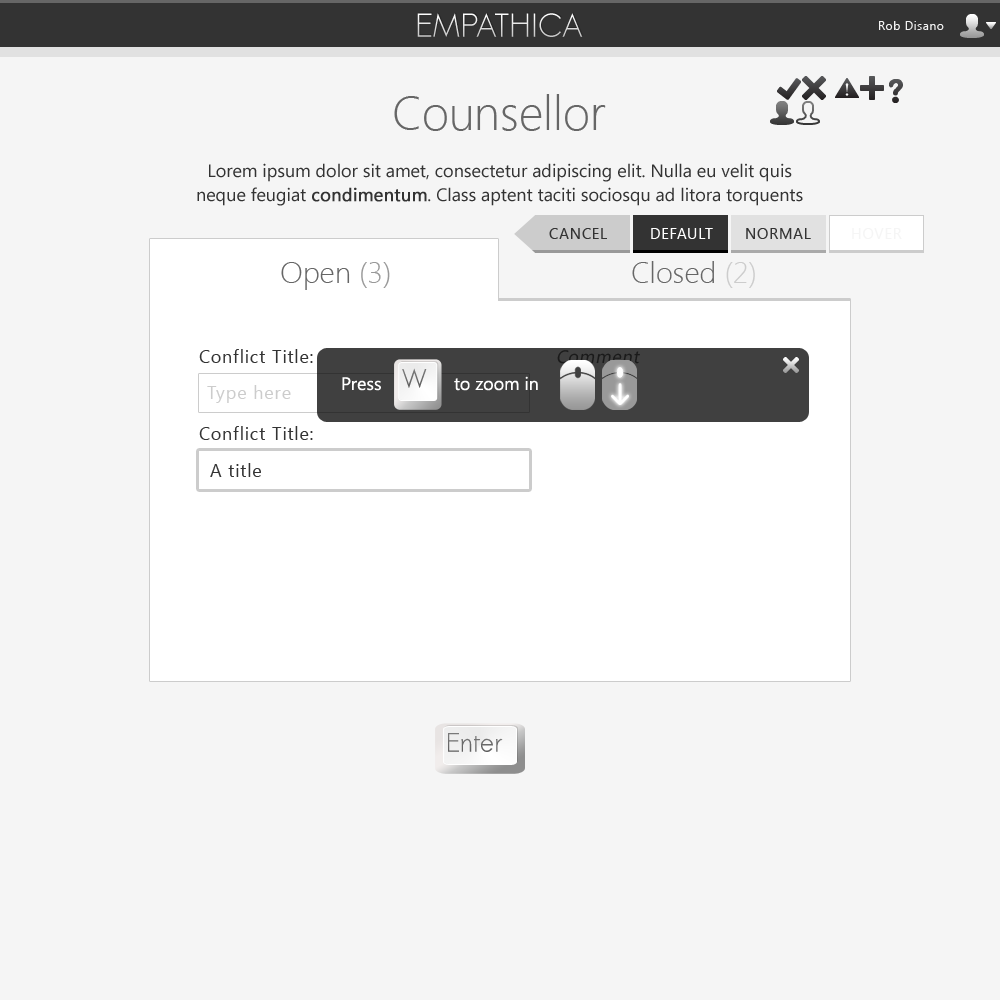
<style>
.page{position:relative;width:1000px;height:1000px;background:#f5f5f5}
.page>*{position:absolute;margin:0}
.t1{font:32px "Sawasdee"}
.t2{font:12px "SegoeUI";letter-spacing:0.05em;color:#f2f2f2}
.t3{font:48px "SegoeUI-Light";color:#666666}
.t4{font:18px/24px "SegoeUI";color:#333333}
.t5{font:18px/24px "SegoeUI";color:#333333;font-weight:bold}
.t6{font:16px "SegoeUI";letter-spacing:0.05em;color:#333333;scale:0.95 1}
.t7{font:16px "SegoeUI";letter-spacing:0.05em;color:#ffffff;scale:0.95 1}
.t8{font:16px "SegoeUI";letter-spacing:0.05em;color:#f5f5f5;scale:0.95 1}
.t9{font:30px "SegoeUI-Light";color:#666666}
.t10{font:30px "SegoeUI-Light";color:#999999}
.t11{font:30px "SegoeUI-Light";color:#cccccc}
.t12{font:18px "SegoeUI";letter-spacing:0.05em;color:#333333}
.t13{font:18px "SegoeUI";color:#ffffff}
.t14{font:25.5px "Sawasdee";color:#5f5f5f}
.t15{font:18px "SegoeUI";letter-spacing:0.05em;color:#cccccc}
</style>
<div class="page">
<p class="t1" style="left:417px;top:13px;width:166px;height:24px">EMPATHICA</p>
<p class="t2" style="left:879px;top:21px;width:65px;height:9px">Rob Disano</p>
<p class="t3" style="left:394px;top:94px;width:212px;height:37px">Counsellor</p>
<p class="t4" style="left:197px;top:163px;width:606px;height:43px;text-align:center">Lorem ipsum dolor sit amet, consectetur adipiscing elit. Nulla eu velit quis <br>neque feugiat <span class="t5">condimentum</span>. Class aptent taciti sociosqu ad litora torquents</p>
<p class="t6" style="left:549px;top:228px;width:58px;height:11px">CANCEL</p>
<p class="t7" style="left:651px;top:228px;width:62px;height:11px">DEFAULT</p>
<p class="t6" style="left:746px;top:228px;width:65px;height:11px">NORMAL</p>
<p class="t8" style="left:852px;top:228px;width:50px;height:11px">HOVER</p>
<p class="t9" style="left:281px;top:262px;width:109px;height:28px">Open <span class="t10">(3)</span></p>
<p class="t9" style="left:632px;top:261px;width:123px;height:27px">Closed <span class="t11">(2)</span></p>
<p class="t12" style="left:199px;top:349px;width:114px;height:14px">Conflict Title:</p>
<p class="t13" style="left:342px;top:376px;width:196px;height:15px">Press   to zoom in</p>
<p class="t14" style="left:402px;top:368px;width:25px;height:20px">W</p>
<p class="t15" style="left:207px;top:385px;width:84px;height:18px">Type here</p>
<p class="t12" style="left:199px;top:426px;width:114px;height:14px">Conflict Title:</p>
<p class="t12" style="left:210px;top:463px;width:51px;height:14px">A title</p>
<p class="t14" style="left:448px;top:733px;width:55px;height:19px">Enter</p>
</div>
